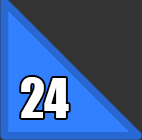
<style>
.page{position:relative;width:142px;height:140px;background:#333333}
.page>*{position:absolute;margin:0}
.t1{font:50px "Impact";color:#ffffff}
</style>
<div class="page">
<p class="t1" style="left:21px;top:77px;width:48px;height:41px">24</p>
</div>
